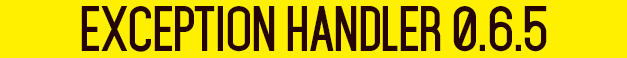
<style>
.page{position:relative;width:627px;height:58px;background:#fff000}
.page>*{position:absolute;margin:0}
.t1{font:55px "Mohave-Bold";letter-spacing:-0.025em;color:#240404;text-transform:uppercase}
</style>
<div class="page">
<p class="t1" style="left:81px;top:6px;width:466px;height:46px">Exception Handler 0.6.5</p>
</div>
